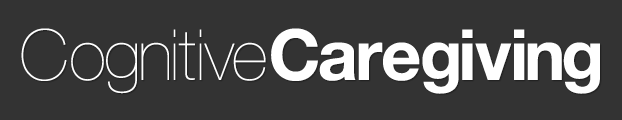
<style>
.page{position:relative;width:622px;height:120px;background:#333333}
.page>*{position:absolute;margin:0}
.t1{font:70.2px "HelveticaNeue-Bold";color:#ffffff}
.t2{font:70.2px "HelveticaNeue-UltraLight";color:#ffffff}
</style>
<div class="page">
<p class="t1" style="left:21px;top:28px;width:579px;height:66px"><span class="t2">Cognitive</span>Caregiving</p>
</div>
